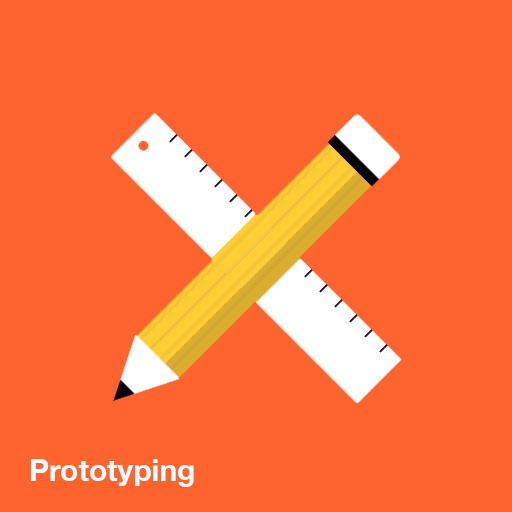
<style>
.page{position:relative;width:512px;height:512px;background:#ff642f}
.page>*{position:absolute;margin:0}
.t1{font:30px "HelveticaNeue-Bold";color:#ffffff}
</style>
<div class="page">
<p class="t1" style="left:31px;top:459px;width:163px;height:28px">Prototyping</p>
</div>
